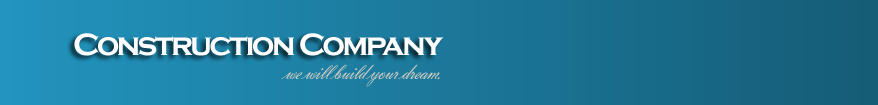
<style>
.page{position:relative;width:878px;height:105px}
.page>*{position:absolute;margin:0}
.t1{font:32px "CopperplateGothic-Bold";letter-spacing:-0.075em;color:#fefefe}
.t2{font:24px "VladimirScript";letter-spacing:-0.075em;color:#cacac0}
</style>
<div class="page">
<p class="t1" style="left:74px;top:33px;width:370px;height:23px">Construction Company</p>
<p class="t2" style="left:281px;top:64px;width:159px;height:23px">we will build your dream.</p>
</div>
